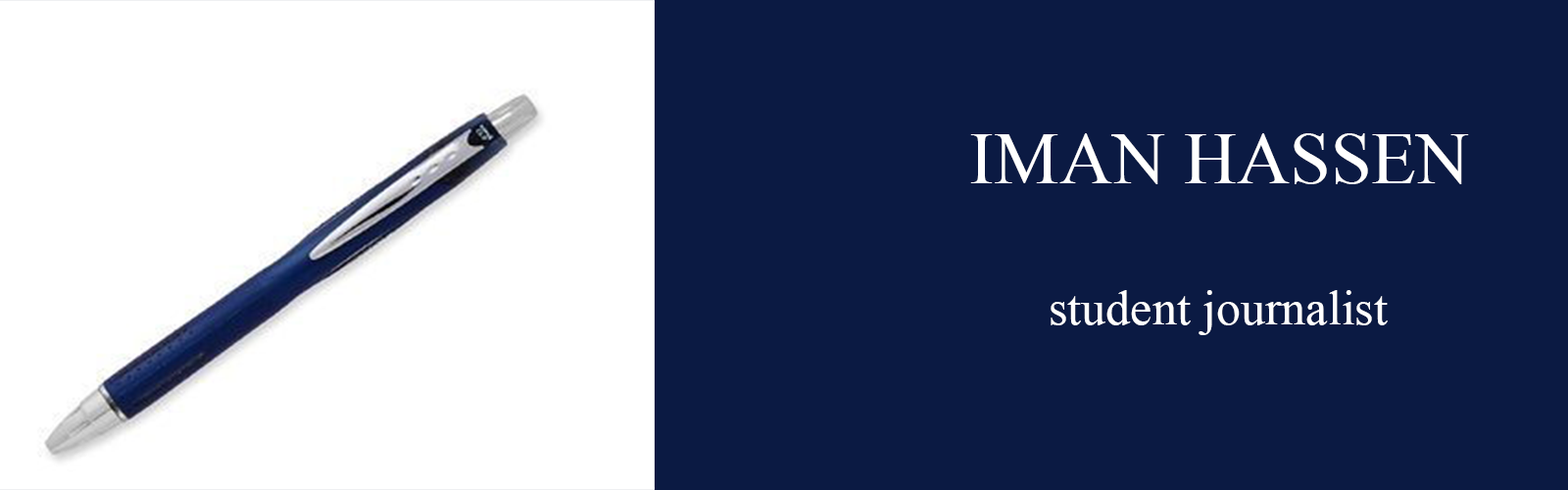
<style>
.page{position:relative;width:1568px;height:490px;background:#0b1a43}
.page>*{position:absolute;margin:0}
.t1{font:73.5px "TimesNewRomanPSMT";color:#ffffff}
.t2{font:49px "TimesNewRomanPSMT";color:#ffffff}
</style>
<div class="page">
<p class="t1" style="left:970px;top:133px;width:499px;height:51px">IMAN HASSEN</p>
<p class="t2" style="left:1051px;top:290px;width:337px;height:45px">student journalist</p>
</div>
